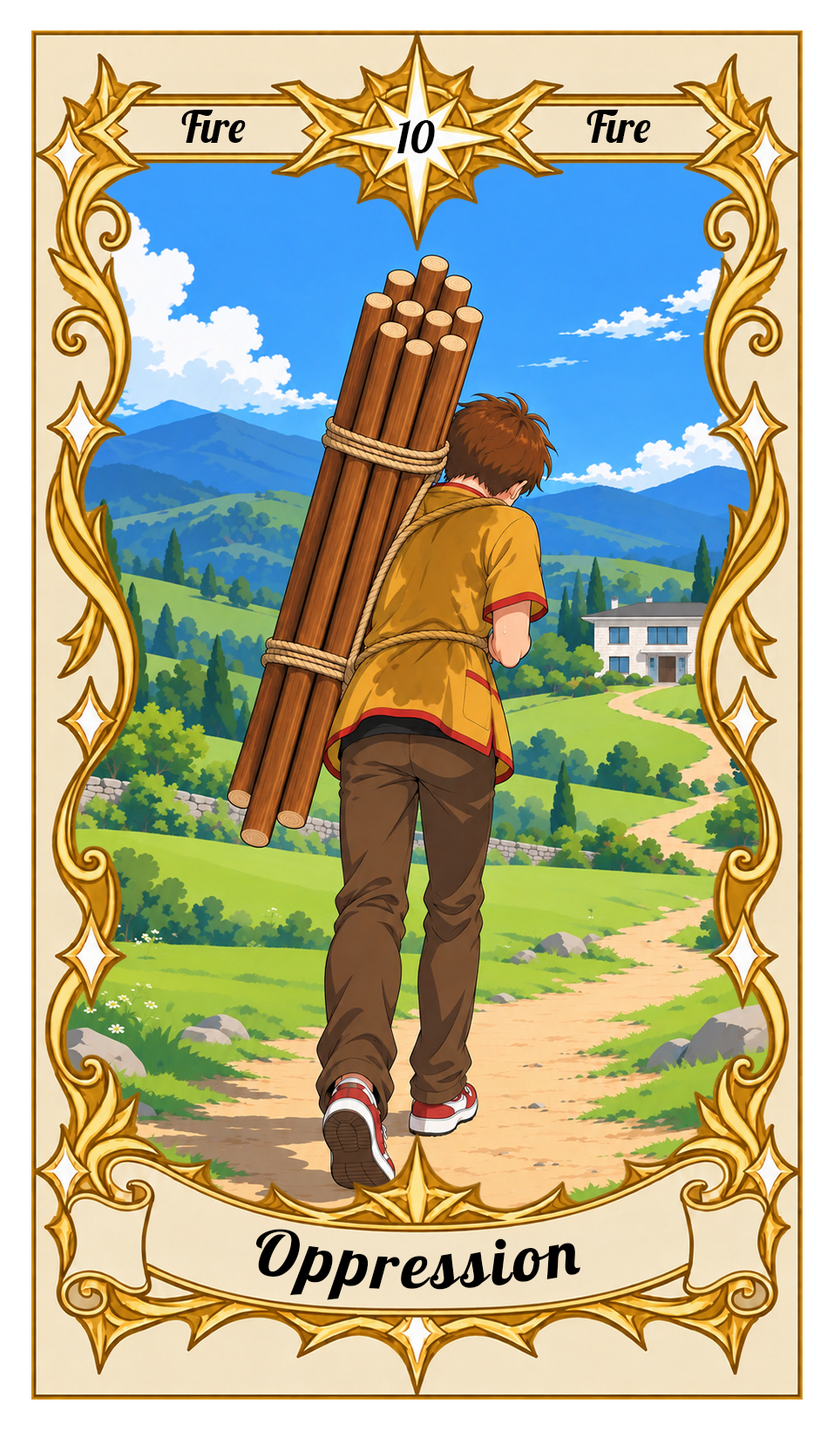
<style>
.page{position:relative;width:834px;height:1430px}
.page>*{position:absolute;margin:0}
.t1{font:43.6px "Lobster-Regular";color:#000000}
.t2{font:65.3px "Lobster-Regular";letter-spacing:0.05em;color:#000000}
</style>
<div class="page">
<p class="t1" style="left:181px;top:110px;width:65px;height:33px">Fire</p>
<p class="t1" style="left:586px;top:110px;width:65px;height:33px">Fire</p>
<p class="t1" style="left:397px;top:120px;width:38px;height:33px">10</p>
<p class="t2" style="left:255px;top:1229px;width:325px;height:72px">Oppression</p>
</div>
